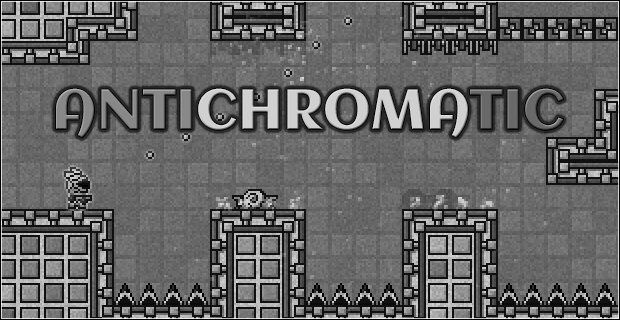
<style>
.page{position:relative;width:620px;height:320px}
.page>*{position:absolute;margin:0}
.t1{font:56px "Aclonica-Regular";color:#d0d0d0}
.t2{font:56px "Aclonica-Regular";color:#888888}
.t3{font:56px "Aclonica-Regular";color:#696969}
</style>
<div class="page">
<p class="t1" style="left:56px;top:88px;width:508px;height:50px"><span class="t2">ANTI</span>CHROMA<span class="t3">TIC</span></p>
</div>
